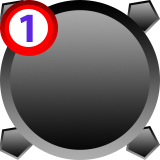
<style>
.page{position:relative;width:160px;height:160px}
.page>*{position:absolute;margin:0}
.t1{font:41.7px "MyriadPro-Bold";color:#5e24e2}
</style>
<div class="page">
<p class="t1" style="left:20px;top:14px;width:13px;height:28px">1</p>
</div>
